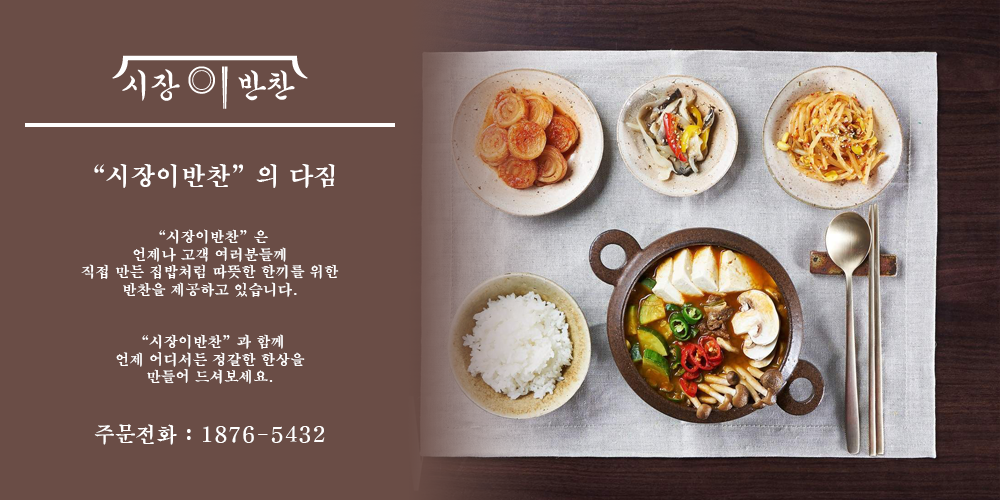
<style>
.page{position:relative;width:1000px;height:500px;background:#6a4d46}
.page>*{position:absolute;margin:0}
.t1{font:14.6px "H2mjrE";color:#ffffff}
.t2{font:25px "H2mjrE";color:#ffffff}
.t3{font:20.8px "H2mjrE";color:#ffffff}
</style>
<div class="page">
<p class="t1" style="left:81px;top:164px;width:258px;height:281px;text-align:center"><span class="t2">“시장이반찬”의 다짐<br><br><br></span>“시장이반찬”은<br>언제나 고객 여러분들께<br>직접 만든 집밥처럼 따뜻한 한끼를 위한<br>반찬을 제공하고 있습니다.<br><br><br>“시장이반찬”과 함께<br>언제 어디서든 정갈한 한상을<br>만들어 드셔보세요.<br><br><br><span class="t3">주문전화 : 1876-5432</span></p>
</div>
